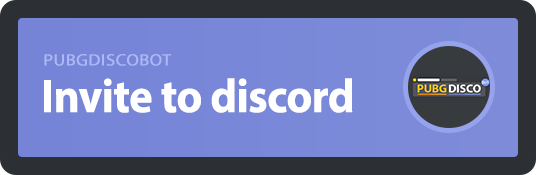
<style>
.page{position:relative;width:536px;height:175px;background:#2c2f34}
.page>*{position:absolute;margin:0}
.t1{font:16.4px "MyriadPro-Regular";letter-spacing:0.02em;color:#acb8f7;font-weight:bold;scale:1.08 1}
.t2{font:47.7px "MyriadPro-Bold";letter-spacing:-0.04em;color:#ffffff;font-weight:bold;scale:0.94 1}
</style>
<div class="page">
<p class="t1" style="left:44px;top:54px;width:128px;height:12px">PUBGDISCOBOT</p>
<p class="t2" style="left:44px;top:78px;width:309px;height:35px">Invite to discord</p>
</div>
